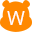
<style>
.page{position:relative;width:32px;height:32px;background:#ff8800}
.page>*{position:absolute;margin:0}
.t1{font:21.1px "SukhumvitSet-Text";color:#ffffff}
</style>
<div class="page">
<p class="t1" style="left:7px;top:11px;width:18px;height:14px">W</p>
</div>
